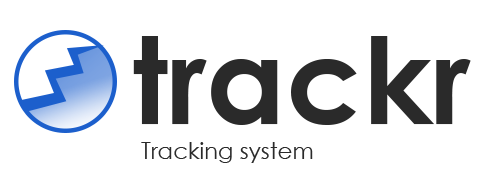
<style>
.page{position:relative;width:490px;height:185px;background:#ffffff}
.page>*{position:absolute;margin:0}
.t1{font:120.3px "CenturyGothic-Bold";color:#2a2a2a}
.t2{font:22.9px "CenturyGothic";color:#2a2a2a}
</style>
<div class="page">
<p class="t1" style="left:133px;top:36px;width:338px;height:89px">trackr</p>
<p class="t2" style="left:141px;top:142px;width:172px;height:21px">Tracking system</p>
</div>
